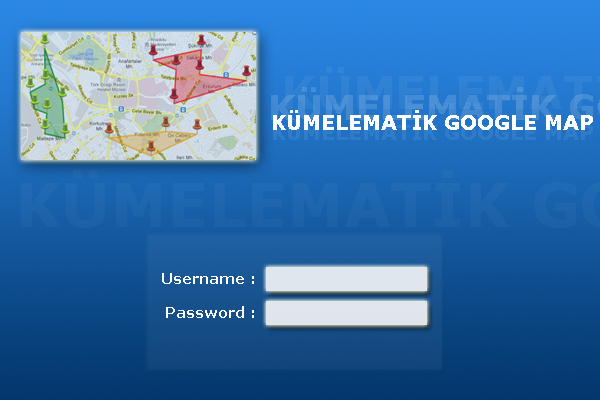
<style>
.page{position:relative;width:600px;height:400px}
.page>*{position:absolute;margin:0}
.t1{font:20px "Verdana-Bold";color:#fefefe}
.t2{font:15px "Verdana-Bold";color:#fefefe}
</style>
<div class="page">
<p class="t1" style="left:273px;top:110px;width:320px;height:20px">KÜMELEMATİK GOOGLE MAP</p>
<p class="t2" style="left:162px;top:273px;width:92px;height:11px">Username :</p>
<p class="t2" style="left:166px;top:306px;width:88px;height:12px">Password :</p>
</div>
